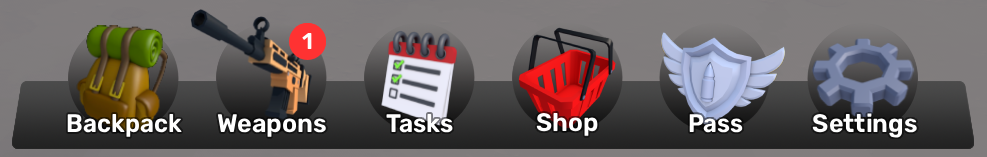
<style>
.page{position:relative;width:987px;height:157px}
.page>*{position:absolute;margin:0}
.t1{font:22.8px "Rubik-SemiBold";color:#ffffff}
.t2{font:25.4px "Rubik-SemiBold";color:#ffffff}
.t3{font:25.4px "Rubik-SemiBold";color:#ffffff;scale:0.95 1}
.t4{font:25.4px "Rubik-SemiBold";color:#ffffff;scale:0.96 1}
.t5{font:25.5px "Rubik-SemiBold";color:#ffffff;scale:0.94 1}
</style>
<div class="page">
<p class="t1" style="left:302px;top:33px;width:10px;height:16px">1</p>
<p class="t2" style="left:536px;top:113px;width:62px;height:23px">Shop</p>
<p class="t2" style="left:812px;top:113px;width:105px;height:25px">Settings</p>
<p class="t3" style="left:67px;top:114px;width:115px;height:23px">Backpack</p>
<p class="t2" style="left:217px;top:114px;width:109px;height:23px">Weapons</p>
<p class="t4" style="left:386px;top:114px;width:67px;height:19px">Tasks</p>
<p class="t5" style="left:689px;top:114px;width:54px;height:19px">Pass</p>
</div>
